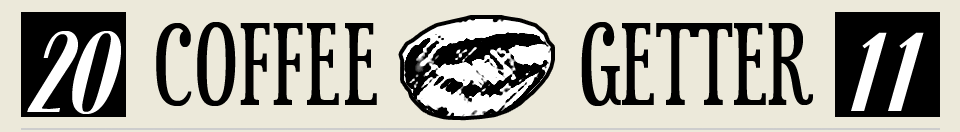
<style>
.page{position:relative;width:960px;height:132px;background:#ece9da}
.page>*{position:absolute;margin:0}
.t1{font:120px "EuphorigenicS";letter-spacing:0.025em;color:#000000}
.t2{font:120px "EuphorigenicS";color:#000000}
.t3{font:117.6px "TziganeMN";color:#ffffff}
.t4{font:116.7px "TziganeMN";letter-spacing:0.1em;color:#ffffff}
</style>
<div class="page">
<p class="t1" style="left:156px;top:22px;width:657px;height:84px">COFFEE<span class="t2">         GETTER</span></p>
<p class="t3" style="left:27px;top:31px;width:94px;height:83px">20</p>
<p class="t4" style="left:851px;top:32px;width:73px;height:79px">11</p>
</div>
